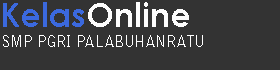
<style>
.page{position:relative;width:280px;height:70px;background:#333333}
.page>*{position:absolute;margin:0}
.t1{font:33px "CenturyGothic-Bold";color:#fdfdfd}
.t2{font:33px "CenturyGothic-Bold";color:#3b69de}
.t3{font:15px "BellGothicStd-Bold";color:#fefefe}
</style>
<div class="page">
<p class="t1" style="left:3px;top:2px;width:186px;height:25px"><span class="t2">Kelas</span>Online</p>
<p class="t3" style="left:3px;top:35px;width:200px;height:12px">SMP PGRI PALABUHANRATU</p>
</div>
